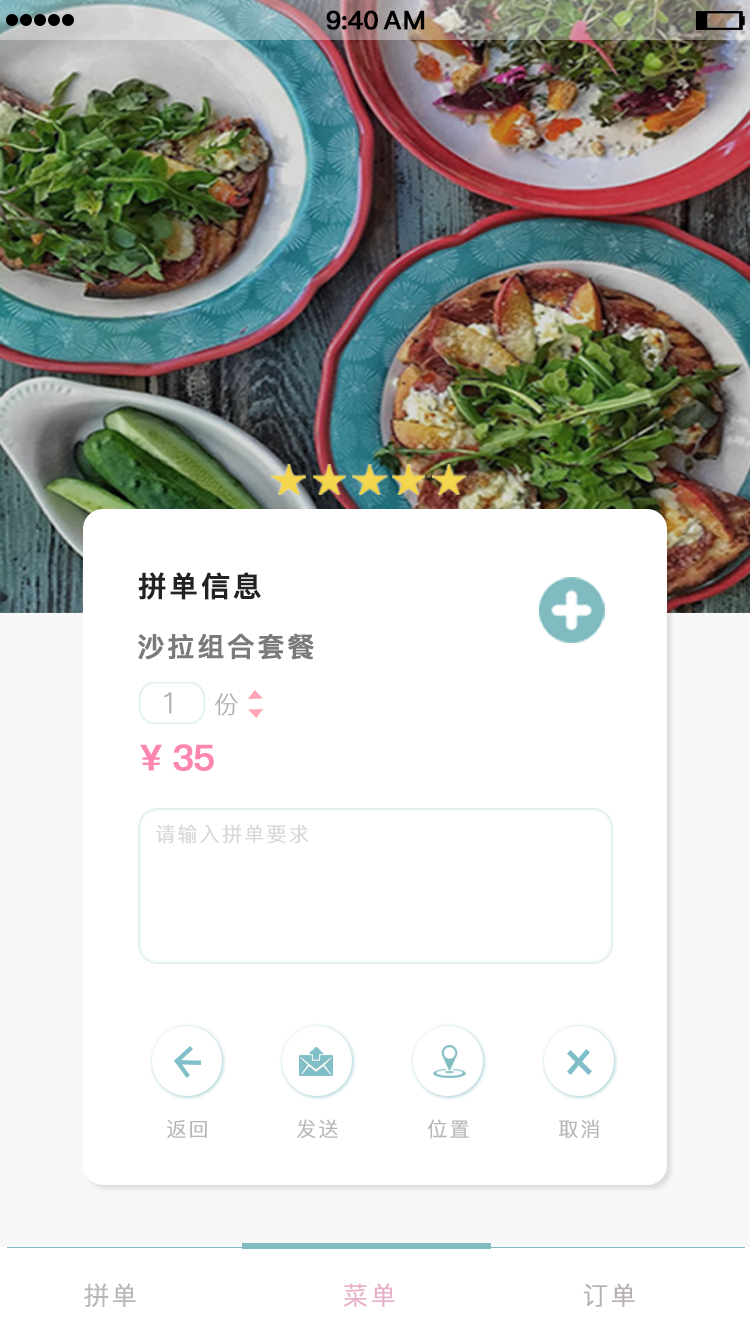
<style>
.page{position:relative;width:750px;height:1334px;background:#ffffff}
.page>*{position:absolute;margin:0}
.t1{font:25.4px "PingFang-SC-Bold";letter-spacing:-0.028em;color:#000000;font-weight:bold}
.t2{font:25.4px "PingFang-SC-Bold";letter-spacing:0.052em;color:#000000;font-weight:bold}
.t3{font:28.5px "PingFang-SC-Bold";letter-spacing:0.085em;color:#222222;font-weight:bold}
.t4{font:27px "PingFang-SC-Bold";letter-spacing:0.085em;color:#7b7a7a;font-weight:bold}
.t5{font:29.2px "PingFang-SC-Light";letter-spacing:0.085em;color:#b4b0b0;font-weight:bold}
.t6{font:24.1px "PingFang-SC-Light";letter-spacing:0.085em;color:#b4b0b0;font-weight:bold}
.t7{font:35.4px "PingFang-SC-Bold";letter-spacing:-0.048em;color:#fd85b1;font-weight:bold}
.t8{font:20px "PingFang-SC-Regular";letter-spacing:0.085em;color:#d5d6d6;font-weight:bold}
.t9{font:20px "PingFang-SC-Regular";letter-spacing:0.085em;color:#b6b8b7;font-weight:bold}
.t10{font:25px "PingFang-SC-Regular";letter-spacing:0.085em;color:#bbb7b7;font-weight:bold}
.t11{font:25px "PingFang-SC-Regular";letter-spacing:0.085em;color:#e6b3ca;font-weight:bold}
.t12{font:25px "PingFang-SC-Regular";letter-spacing:0.085em;color:#b7b1b1;font-weight:bold}
</style>
<div class="page">
<p class="t1" style="left:326px;top:10px;width:52px;height:20px">9:40</p>
<p class="t2" style="left:383px;top:10px;width:42px;height:20px">AM</p>
<p class="t3" style="left:138px;top:572px;width:123px;height:28px">拼单信息</p>
<p class="t4" style="left:138px;top:633px;width:176px;height:27px">沙拉组合套餐</p>
<p class="t5" style="left:164px;top:692px;width:8px;height:22px">1</p>
<p class="t6" style="left:214px;top:693px;width:24px;height:23px">份</p>
<p class="t7" style="left:140px;top:744px;width:74px;height:27px">¥ 35</p>
<p class="t8" style="left:155px;top:824px;width:153px;height:20px">请输入拼单要求</p>
<p class="t9" style="left:167px;top:1119px;width:40px;height:20px">返回</p>
<p class="t9" style="left:297px;top:1119px;width:41px;height:20px">发送</p>
<p class="t9" style="left:427px;top:1119px;width:42px;height:20px">位置</p>
<p class="t9" style="left:559px;top:1119px;width:40px;height:20px">取消</p>
<p class="t10" style="left:84px;top:1283px;width:52px;height:24px">拼单</p>
<p class="t11" style="left:344px;top:1283px;width:51px;height:24px">菜单</p>
<p class="t12" style="left:583px;top:1283px;width:52px;height:24px">订单</p>
</div>
